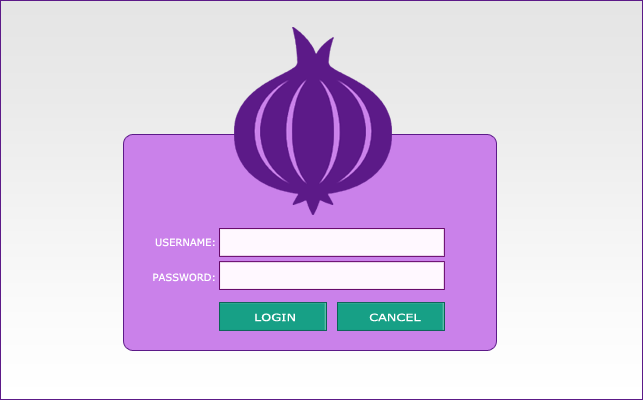
<style>
.page{position:relative;width:643px;height:400px;background:#ca81ea}
.page>*{position:absolute;margin:0}
.t1{font:10px "Verdana";color:#ffffff}
.t2{font:10px "Verdana";color:#feffff}
.t3{font:10px "Verdana";color:#ffffff;scale:1.28 1}
</style>
<div class="page">
<p class="t1" style="left:155px;top:238px;width:60px;height:9px">USERNAME:</p>
<p class="t2" style="left:153px;top:273px;width:62px;height:9px">PASSWORD:</p>
<p class="t3" style="left:255px;top:313px;width:40px;height:9px">LOGIN</p>
<p class="t3" style="left:369px;top:313px;width:52px;height:9px">CANCEL</p>
</div>
